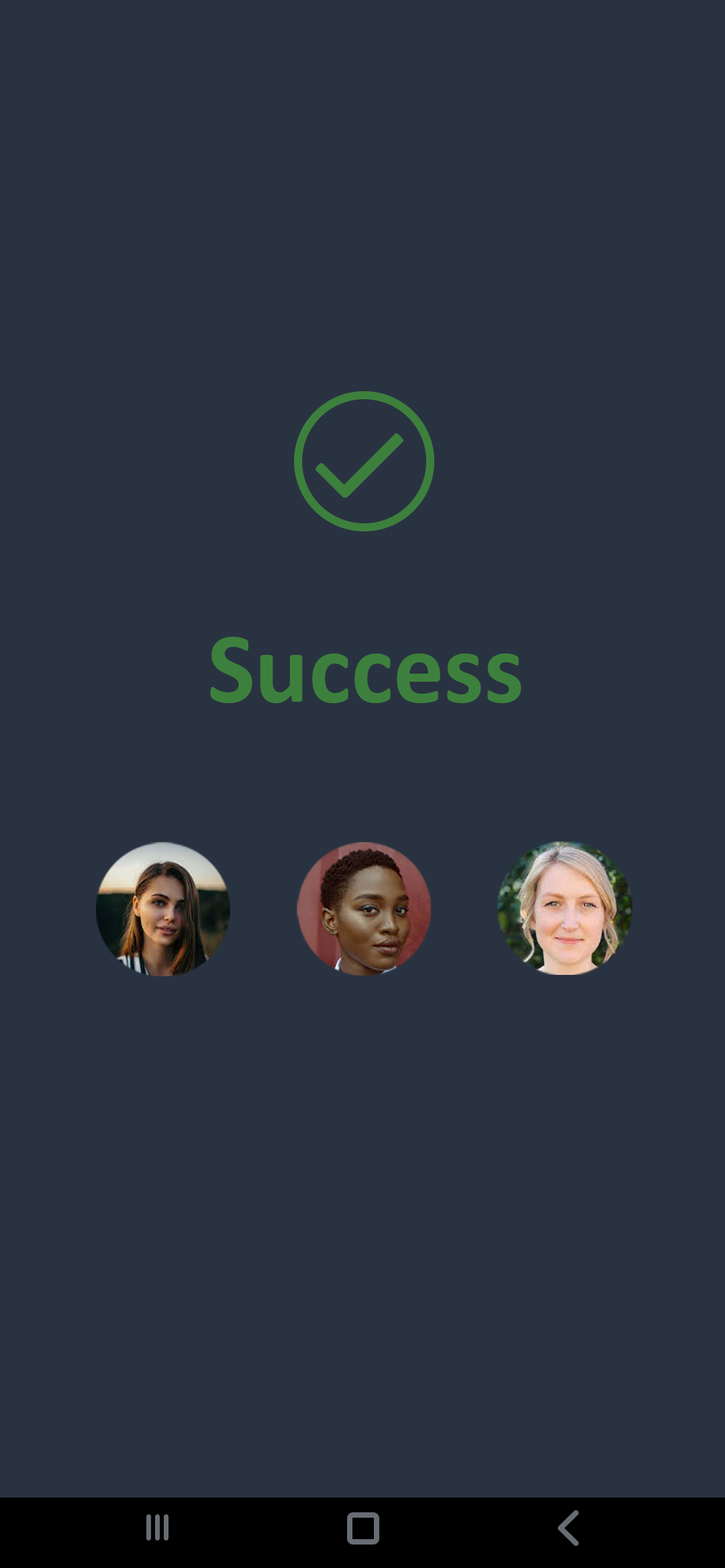
<style>
.page{position:relative;width:725px;height:1568px;background:#293241}
.page>*{position:absolute;margin:0}
.t1{font:131.9px "Calibri";color:#3d803d}
.t2{font:100.6px "Calibri-Bold";color:#3d803d}
</style>
<div class="page">
<p class="t1" style="left:315px;top:433px;width:88px;height:65px;rotate:-135deg">L</p>
<p class="t2" style="left:210px;top:637px;width:311px;height:66px">Success</p>
</div>
